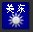
<style>
.page{position:relative;width:33px;height:32px;background:#000090}
.page>*{position:absolute;margin:0}
.t1{font:10.4px "SimSun";color:#ffffff}
</style>
<div class="page">
<p class="t1" style="left:6px;top:4px;width:19px;height:9px">美东</p>
</div>
